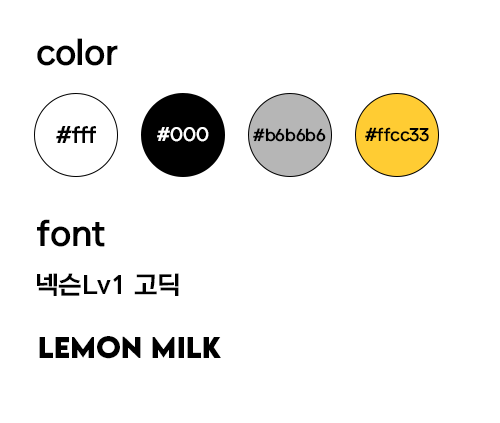
<style>
.page{position:relative;width:500px;height:423px;background:#ffffff}
.page>*{position:absolute;margin:0}
.t1{font:33.9px "NEXONLv1GothicOTFBold";color:#000000}
.t2{font:21.7px "NEXONLv1GothicOTFBold";color:#000000}
.t3{font:18px "NEXONLv1GothicOTFBold";color:#ffffff}
.t4{font:16px "NEXONLv1GothicOTFBold";color:#000000}
.t5{font:17px "NEXONLv1GothicOTFBold";color:#000000}
.t6{font:25px "NEXONLv1GothicOTFBold";color:#000000}
.t7{font:26.5px "LEMONMILK-Bold";color:#000000}
</style>
<div class="page">
<p class="t1" style="left:37px;top:38px;width:81px;height:28px">color</p>
<p class="t2" style="left:56px;top:126px;width:40px;height:17px">#fff</p>
<p class="t3" style="left:157px;top:127px;width:52px;height:15px">#000</p>
<p class="t4" style="left:253px;top:128px;width:73px;height:14px">#b6b6b6</p>
<p class="t5" style="left:365px;top:127px;width:64px;height:15px">#ffcc33</p>
<p class="t1" style="left:37px;top:219px;width:68px;height:28px">font</p>
<p class="t6" style="left:37px;top:273px;width:142px;height:23px">넥슨Lv1 고딕</p>
<p class="t7" style="left:39px;top:336px;width:182px;height:23px">LEMON milk</p>
</div>
